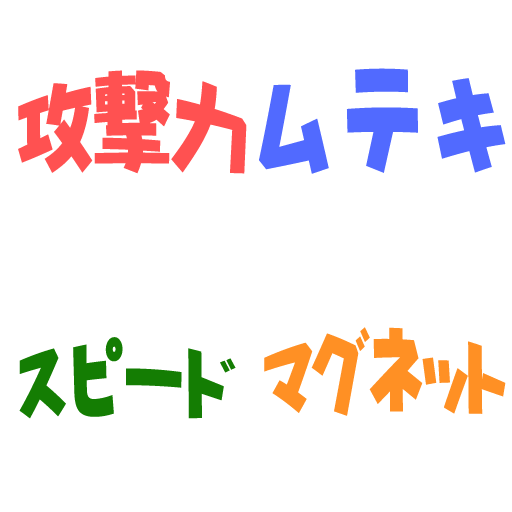
<style>
.page{position:relative;width:512px;height:512px;background:#ffffff}
.page>*{position:absolute;margin:0}
.t1{font:76.6px "NIS-JYA-U-83pv-RKSJ-H";color:#ff5151}
.t2{font:88.6px "NIS-JYA-U-83pv-RKSJ-H";color:#516aff}
.t3{font:67px "NIS-JYA-U-83pv-RKSJ-H";color:#ff9024}
.t4{font:63.3px "NIS-JYA-U-83pv-RKSJ-H";color:#147d03}
</style>
<div class="page">
<p class="t1" style="left:18px;top:70px;width:229px;height:104px">攻撃力</p>
<p class="t2" style="left:259px;top:68px;width:247px;height:106px">ムテキ</p>
<p class="t3" style="left:264px;top:327px;width:242px;height:89px">マグネット</p>
<p class="t4" style="left:19px;top:337px;width:217px;height:82px">スピード</p>
</div>
